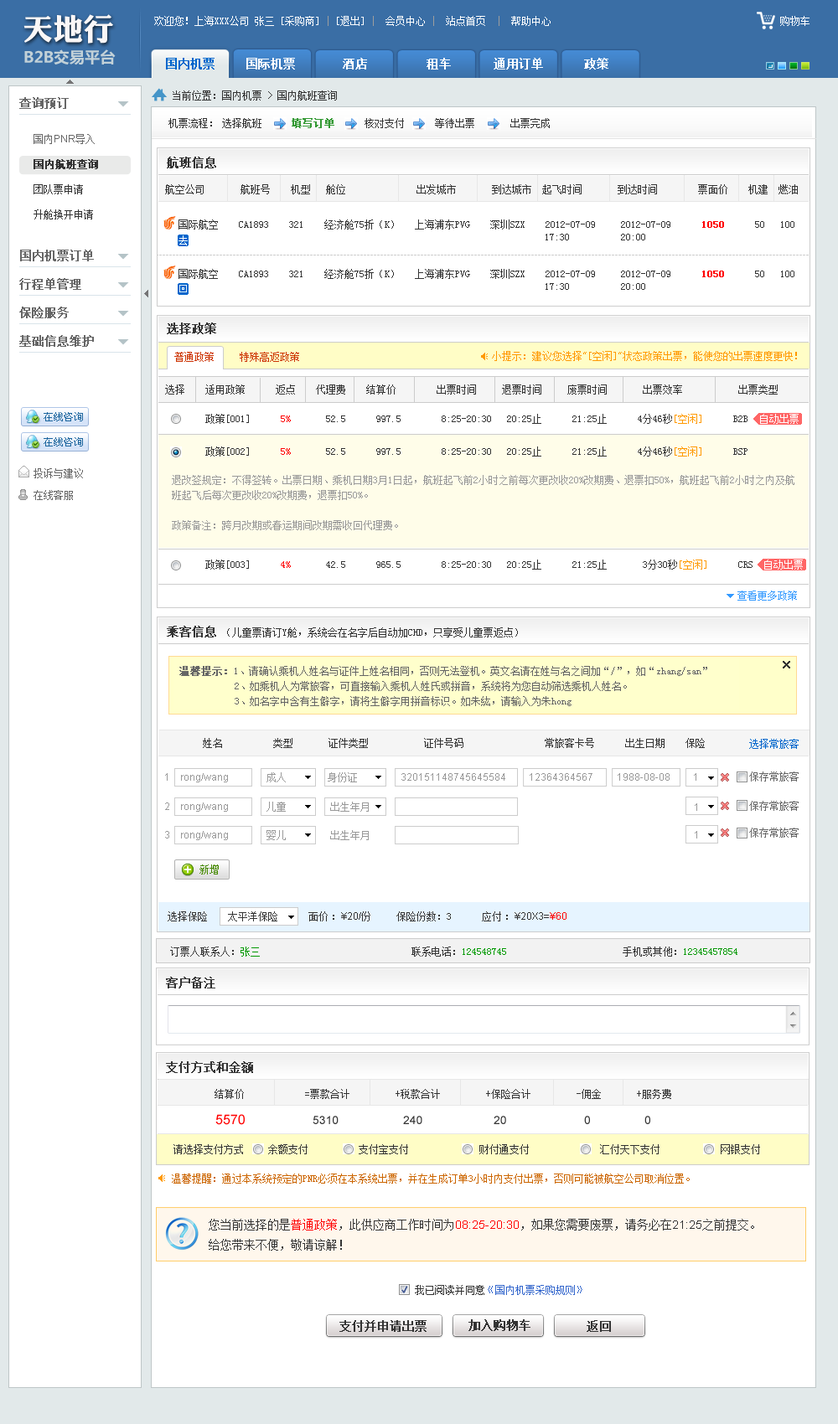
<style>
.page{position:relative;width:838px;height:1424px;background:#ffffff}
.page>*{position:absolute;margin:0}
.t1{font:30.3px "DFPLiJinHeiW8";color:#faf7f7}
.t2{font:10.1px "SimSun";color:#ffffff}
.t3{font:10.1px "SimSun";color:#9e9e9e}
.t4{font:15.3px "MicrosoftYaHei-Bold";color:#c2d1d8}
.t5{font:11.7px "SimSun";color:#ffffff;font-weight:bold}
.t6{font:11.7px "SimSun";color:#0066cc;font-weight:bold}
.t7{font:11.7px "SimSun";color:#666666;font-weight:bold}
.t8{font:10.1px "SimSun";color:#333333}
.t9{font:10.1px "SimSun";color:#339933;font-weight:bold}
.t10{font:10.1px "ArialMT";color:#666666}
.t11{font:10.1px "SimSun";color:#666666}
.t12{font:10.1px/25.1px "SimSun";color:#333333}
.t13{font:10.1px/25.1px "SimSun";color:#333333;font-weight:bold}
.t14{font:11.7px "SimSun";color:#333333;font-weight:bold}
.t15{font:10.1px "SimSun";color:#ff0000;font-weight:bold}
.t16{font:10.1px "SimSun";color:#cc3300}
.t17{font:10.1px "SimSun";color:#ff9900}
.t18{font:10.1px "SimSun";color:#ff0000}
.t19{font:10.1px/21.8px "SimSun";color:#666666}
.t20{font:10.1px/15.1px "SimSun";color:#999999}
.t21{font:10.1px "SimSun";color:#3399ff}
.t22{font:10.1px/15.1px "SimSun";color:#666666}
.t23{font:10.1px/15.1px "SimSun";color:#666666;font-weight:bold}
.t24{font:10.1px "SimSun";color:#0066cc}
.t25{font:10.1px "ArialMT";color:#999999}
.t26{font:10.1px "SimSun";color:#999999}
.t27{font:10.1px "SimSun";color:#468900}
.t28{font:10.1px "ArialMT";color:#333333}
.t29{font:10.1px "ArialMT";color:#ff0000}
.t30{font:10.1px "SimSun";color:#009900}
.t31{font:13.4px "ArialMT";color:#ff0000}
.t32{font:11.7px "ArialMT";color:#333333}
.t33{font:10.1px "SimSun";color:#cc6600}
.t34{font:11.7px/20.1px "SimSun";color:#333333}
.t35{font:11.7px/20.1px "SimSun";color:#ff0000}
.t36{font:11.7px/20.1px "ArialMT";color:#ff0000}
.t37{font:11.7px/20.1px "ArialMT";color:#333333}
.t38{font:10.1px "SimSun";color:#3366cc}
</style>
<div class="page">
<p class="t1" style="left:23px;top:14px;width:90px;height:30px">天地行</p>
<p class="t2" style="left:154px;top:16px;width:396px;height:10px">欢迎您！上海XXX公司 张三 [采购商]<span class="t3"> | </span>[退出] <span class="t3">|</span>  会员中心 <span class="t3">|</span>  站点首页  <span class="t3">|</span>  帮助中心</p>
<p class="t2" style="left:780px;top:16px;width:29px;height:10px">购物车</p>
<p class="t4" style="left:24px;top:49px;width:92px;height:16px">B2B交易平台</p>
<p class="t5" style="left:166px;top:58px;width:442px;height:12px"><span class="t6">国内机票</span>    国际机票     酒店     租车     通用订单      政策</p>
<p class="t7" style="left:19px;top:97px;width:50px;height:12px">查询预订</p>
<p class="t8" style="left:173px;top:90px;width:164px;height:11px">当前位置：国内机票 &gt; 国内航班查询</p>
<p class="t8" style="left:168px;top:118px;width:44px;height:10px">机票流程：</p>
<p class="t8" style="left:222px;top:118px;width:327px;height:10px">选择航班<span class="t9">     填写订单     </span>核对支付      等待出票       出票完成</p>
<p class="t10" style="left:34px;top:134px;width:61px;height:10px"><span class="t11">国内</span>PNR<span class="t11">导入</span></p>
<p class="t12" style="left:34px;top:159px;width:64px;height:60px"><span class="t13">国内航班查询<br></span>团队票申请<br>升舱换开申请</p>
<p class="t14" style="left:167px;top:157px;width:49px;height:11px">航班信息</p>
<p class="t8" style="left:165px;top:184px;width:632px;height:10px">航空公司      航班号    机型   舱位              出发城市       到达城市  起飞时间   到达时间       票面价    机建  燃油</p>
<p class="t8" style="left:178px;top:219px;width:616px;height:10px">国际航空    CA1893    321    经济舱75折（K）   上海浦东PVG    深圳SZX    2012-07-09     2012-07-09      <span class="t15">1050</span>      50   100</p>
<p class="t8" style="left:545px;top:234px;width:24px;height:6px">17:30</p>
<p class="t8" style="left:621px;top:234px;width:24px;height:6px">20:00</p>
<p class="t7" style="left:20px;top:250px;width:74px;height:11px">国内机票订单</p>
<p class="t8" style="left:178px;top:269px;width:616px;height:10px">国际航空    CA1893    321    经济舱75折（K）   上海浦东PVG    深圳SZX    2012-07-09     2012-07-09      <span class="t15">1050</span>      50   100</p>
<p class="t7" style="left:19px;top:278px;width:62px;height:12px">行程单管理</p>
<p class="t8" style="left:545px;top:283px;width:24px;height:7px">17:30</p>
<p class="t8" style="left:621px;top:283px;width:24px;height:7px">20:00</p>
<p class="t7" style="left:19px;top:307px;width:50px;height:11px">保险服务</p>
<p class="t14" style="left:167px;top:322px;width:49px;height:12px">选择政策</p>
<p class="t7" style="left:19px;top:335px;width:75px;height:12px">基础信息维护</p>
<p class="t16" style="left:174px;top:352px;width:125px;height:10px">普通政策     特殊高返政策</p>
<p class="t17" style="left:492px;top:351px;width:304px;height:10px">小提示：建议您选择"[空闲]"状态政策出票，能使您的出票速度更快！</p>
<p class="t8" style="left:165px;top:384px;width:612px;height:10px">选择    适用政策      返点    代理费    结算价        出票时间     退票时间     废票时间       出票效率           出票类型</p>
<p class="t8" style="left:205px;top:414px;width:542px;height:10px">政策[001]      <span class="t18">5%</span>       52.5      997.5        8:25-20:30   20:25止      21:25止      4分46秒<span class="t17">[空闲]</span>      B2B</p>
<p class="t2" style="left:760px;top:414px;width:38px;height:10px">自动出票</p>
<p class="t8" style="left:205px;top:446px;width:542px;height:10px">政策[002]      <span class="t18">5%</span>       52.5      997.5        8:25-20:30   20:25止      21:25止      4分46秒<span class="t17">[空闲]</span>      BSP</p>
<p class="t19" style="left:34px;top:468px;width:49px;height:32px">投诉与建议 <br>在线客服</p>
<p class="t20" style="left:172px;top:475px;width:622px;height:55px">退改签规定：不得签转。出票日期、乘机日期3月1日起，航班起飞前2小时之前每次更改收20%改期费、退票扣50%，航班起飞前2小时之内及航班起飞后每次更改收20%改期费，退票扣50%。<br><br>政策备注：跨月改期或春运期间改期需收回代理费。</p>
<p class="t8" style="left:205px;top:559px;width:547px;height:11px">政策[003]      <span class="t18">4%</span>       42.5      965.5        8:25-20:30   20:25止      21:25止       3分30秒<span class="t17">[空闲]</span>      CRS</p>
<p class="t2" style="left:764px;top:559px;width:38px;height:11px">自动出票</p>
<p class="t21" style="left:737px;top:590px;width:59px;height:10px">查看更多政策</p>
<p class="t14" style="left:167px;top:626px;width:49px;height:11px">乘客信息</p>
<p class="t8" style="left:227px;top:627px;width:291px;height:10px">（儿童票请订Y舱，系统会在名字后自动加CHD，只享受儿童票返点）</p>
<p class="t22" style="left:179px;top:666px;width:528px;height:40px"><span class="t23">温馨提示：</span>1、请确认乘机人姓名与证件上姓名相同，否则无法登机。英文名请在姓与名之间加“/”，如“zhang/san”<br>      2、如乘机人为常旅客，可直接输入乘机人姓氏或拼音，系统将为您自动筛选乘机人姓名。<br>      3、如名字中含有生僻字，请将生僻字用拼音标识。如朱紘，请输入为朱hong</p>
<p class="t8" style="left:203px;top:738px;width:501px;height:10px">姓名     类型  证件类型    证件号码     常旅客卡号 出生日期    保险</p>
<p class="t24" style="left:749px;top:739px;width:49px;height:10px">选择常旅客</p>
<p class="t25" style="left:165px;top:772px;width:531px;height:10px">1    rong/wang               <span class="t26">成人      身份证</span>                 320151148745645584        12364364567  1988-08-08         1</p>
<p class="t11" style="left:749px;top:771px;width:49px;height:10px">保存常旅客</p>
<p class="t25" style="left:165px;top:802px;width:204px;height:10px">2    rong/wang               <span class="t26">儿童       出生年月</span></p>
<p class="t25" style="left:694px;top:803px;width:3px;height:8px">1</p>
<p class="t11" style="left:749px;top:801px;width:49px;height:10px">保存常旅客</p>
<p class="t25" style="left:165px;top:830px;width:204px;height:10px">3    rong/wang               <span class="t26">婴儿       出生年月</span></p>
<p class="t25" style="left:694px;top:831px;width:3px;height:7px">1</p>
<p class="t11" style="left:749px;top:827px;width:49px;height:11px">保存常旅客</p>
<p class="t27" style="left:199px;top:864px;width:20px;height:10px">新增</p>
<p class="t8" style="left:168px;top:911px;width:398px;height:10px">选择保险        太平洋保险            面价 ：<span class="t28">¥20/</span>份          保险份数：3      应付 ：<span class="t28">¥20X3=</span><span class="t29">¥60</span></p>
<p class="t30" style="left:170px;top:946px;width:567px;height:10px"><span class="t8">订票人联系人：</span>张三        <span class="t8">联系电话：</span>124548745       <span class="t8">手机或其他：</span>12345457854</p>
<p class="t14" style="left:166px;top:977px;width:49px;height:11px">客户备注</p>
<p class="t14" style="left:166px;top:1061px;width:87px;height:12px">支付方式和金额</p>
<p class="t8" style="left:214px;top:1089px;width:457px;height:10px">结算价       =票款合计      +税款合计     +保险合计     -佣金      +服务费</p>
<p class="t31" style="left:215px;top:1114px;width:30px;height:11px">5570</p>
<p class="t32" style="left:312px;top:1116px;width:338px;height:8px">5310   240     20   0  0</p>
<p class="t8" style="left:173px;top:1144px;width:70px;height:10px">请选择支付方式</p>
<p class="t8" style="left:268px;top:1144px;width:492px;height:10px">余额支付  支付宝支付   财付通支付   汇付天下支付  网银支付</p>
<p class="t33" style="left:172px;top:1173px;width:517px;height:10px">温馨提醒：通过本系统预定的PNR必须在本系统出票，并在生成订单3小时内支付出票，否则可能被航空公司取消位置。</p>
<p class="t34" style="left:209px;top:1219px;width:545px;height:31px">您当前选择的是<span class="t35">普通政策</span>，此供应商工作时间为<span class="t36">08:25-20:30</span>，如果您需要废票，请务必在<span class="t37">21:25</span>之前提交。<br>给您带来不便，敬请谅解！</p>
<p class="t38" style="left:415px;top:1285px;width:167px;height:10px"><span class="t8">我已阅读并同意</span>《国内机票采购规则》</p>
<p class="t14" style="left:339px;top:1320px;width:87px;height:12px">支付并申请出票</p>
<p class="t14" style="left:468px;top:1319px;width:62px;height:12px">加入购物车</p>
<p class="t14" style="left:586px;top:1320px;width:25px;height:12px">返回</p>
</div>
